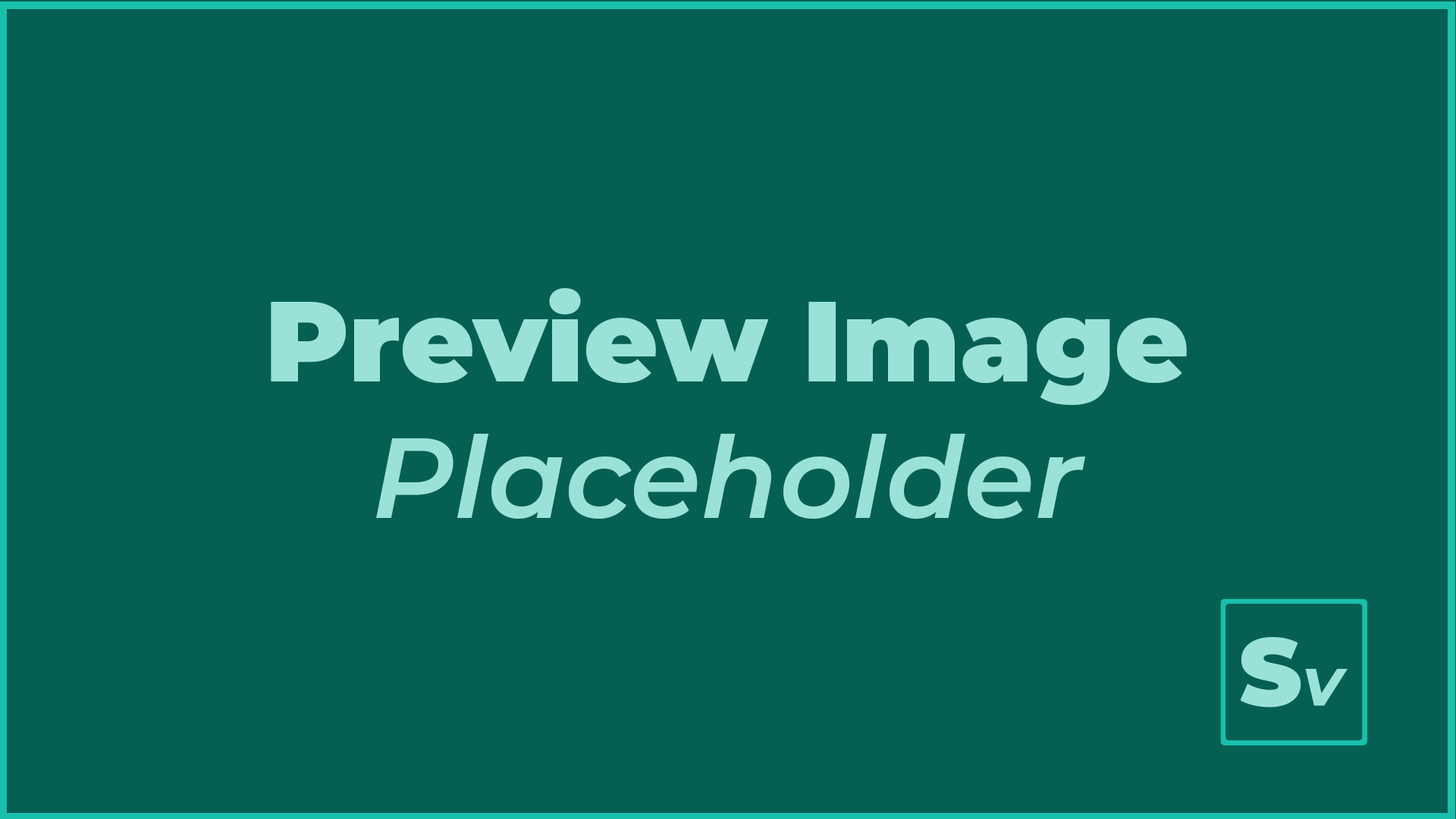
<style>
.page{position:relative;width:1456px;height:819px;background:#056053}
.page>*{position:absolute;margin:0}
.t1{font:113.7px "Montserrat-Black";color:#9ae2d7}
.t2{font:113.7px "Montserrat-SemiBoldItalic";color:#9ae2d7}
</style>
<div class="page">
<p class="t1" style="left:271px;top:288px;width:916px;height:231px;text-align:center">Preview Image<br><span class="t2">Placeholder</span></p>
</div>
